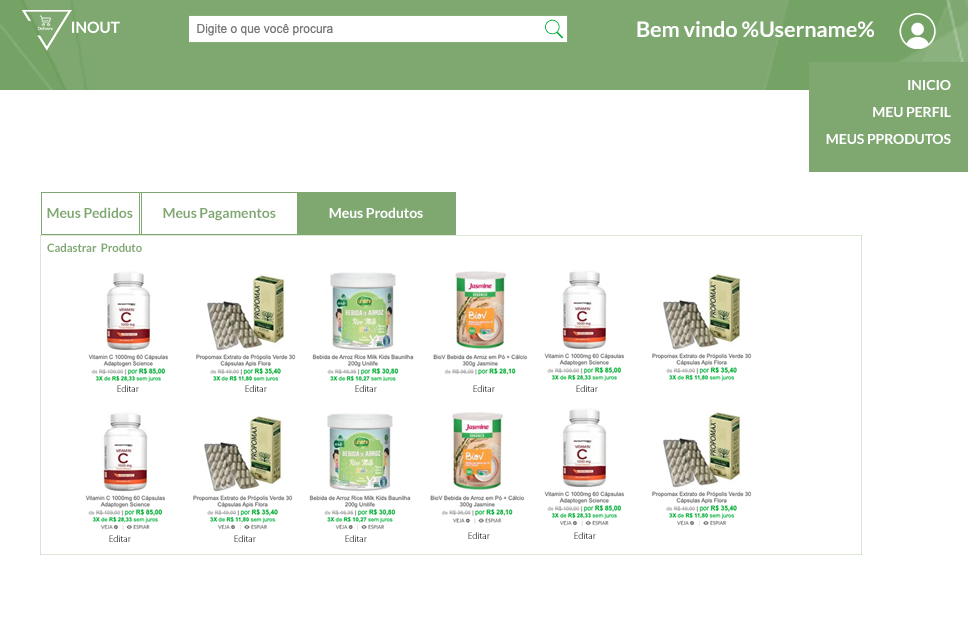
<style>
.page{position:relative;width:968px;height:619px;background:#ffffff}
.page>*{position:absolute;margin:0}
.t1{font:21.7px "Lato-Bold";letter-spacing:-0.005em;color:#ffffff}
.t2{font:14px/27px "Lato-Bold";letter-spacing:-0.005em;color:#ffffff}
.t3{font:14px "Lato-Bold";letter-spacing:-0.005em;color:#7ea86f}
.t4{font:14px "Lato-Bold";letter-spacing:-0.005em;color:#ffffff}
.t5{font:11.6px "Lato-Bold";letter-spacing:-0.005em;color:#7ea86f}
.t6{font:8.5px "KozGoPr6N-Regular";letter-spacing:-0.005em}
</style>
<div class="page">
<p class="t1" style="left:637px;top:21px;width:237px;height:16px">Bem vindo %Username%</p>
<p class="t2" style="left:826px;top:80px;width:125px;height:64px;text-align:right">INICIO <br>MEU PERFIL<br>MEUS PPRODUTOS</p>
<p class="t3" style="left:47px;top:207px;width:86px;height:11px">Meus Pedidos</p>
<p class="t3" style="left:163px;top:208px;width:113px;height:13px">Meus Pagamentos</p>
<p class="t4" style="left:329px;top:207px;width:94px;height:11px">Meus Produtos</p>
<p class="t5" style="left:47px;top:243px;width:95px;height:9px">Cadastrar  Produto</p>
<p class="t6" style="left:117px;top:385px;width:22px;height:7px">Editar</p>
<p class="t6" style="left:245px;top:385px;width:22px;height:7px">Editar</p>
<p class="t6" style="left:355px;top:385px;width:22px;height:7px">Editar</p>
<p class="t6" style="left:473px;top:385px;width:22px;height:7px">Editar</p>
<p class="t6" style="left:576px;top:385px;width:22px;height:7px">Editar</p>
<p class="t6" style="left:468px;top:532px;width:22px;height:7px">Editar</p>
<p class="t6" style="left:574px;top:532px;width:22px;height:7px">Editar</p>
<p class="t6" style="left:109px;top:535px;width:22px;height:7px">Editar</p>
<p class="t6" style="left:234px;top:535px;width:22px;height:7px">Editar</p>
<p class="t6" style="left:345px;top:535px;width:22px;height:7px">Editar</p>
</div>
